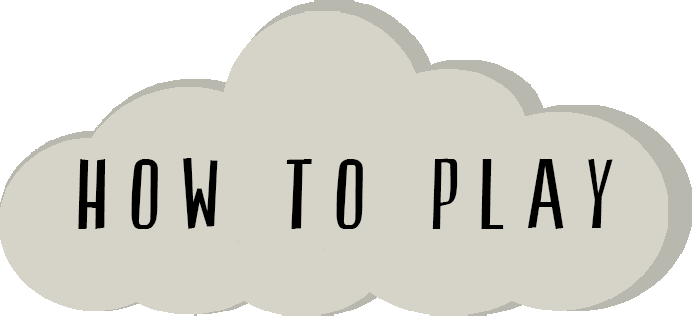
<style>
.page{position:relative;width:692px;height:316px;background:#d6d4c9}
.page>*{position:absolute;margin:0}
.t1{font:100px "SwallowFalls";letter-spacing:0.2em;color:#000000}
</style>
<div class="page">
<p class="t1" style="left:78px;top:158px;width:535px;height:71px">How to Play</p>
</div>
